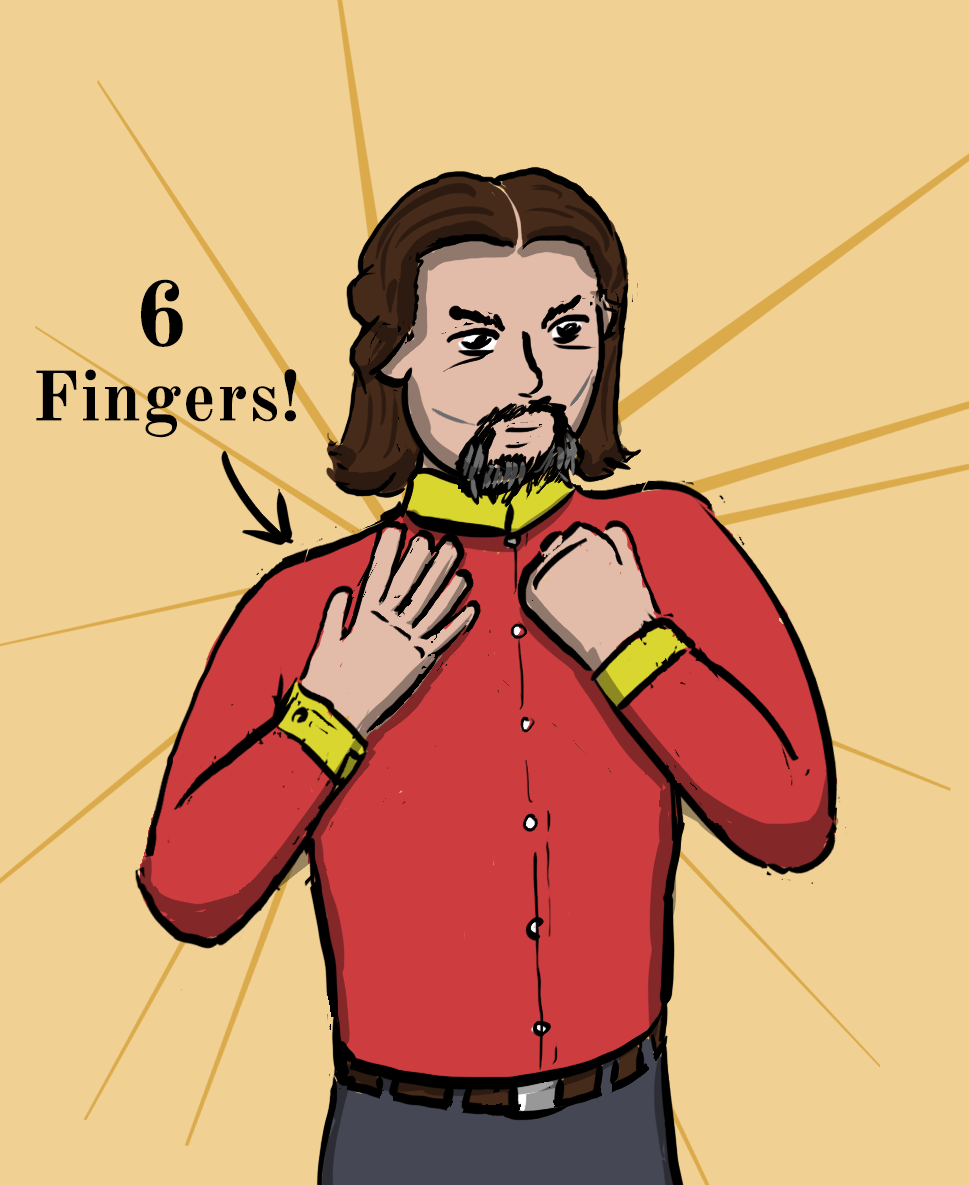
<style>
.page{position:relative;width:969px;height:1185px;background:#f0d093}
.page>*{position:absolute;margin:0}
.t1{font:90px "OldStandardTT-Bold";letter-spacing:0.02em;color:#000000}
.t2{font:70px "OldStandardTT-Bold";letter-spacing:0.02em;color:#000000}
</style>
<div class="page">
<p class="t1" style="left:141px;top:279px;width:42px;height:68px">6</p>
<p class="t2" style="left:36px;top:369px;width:261px;height:69px">Fingers!</p>
</div>
